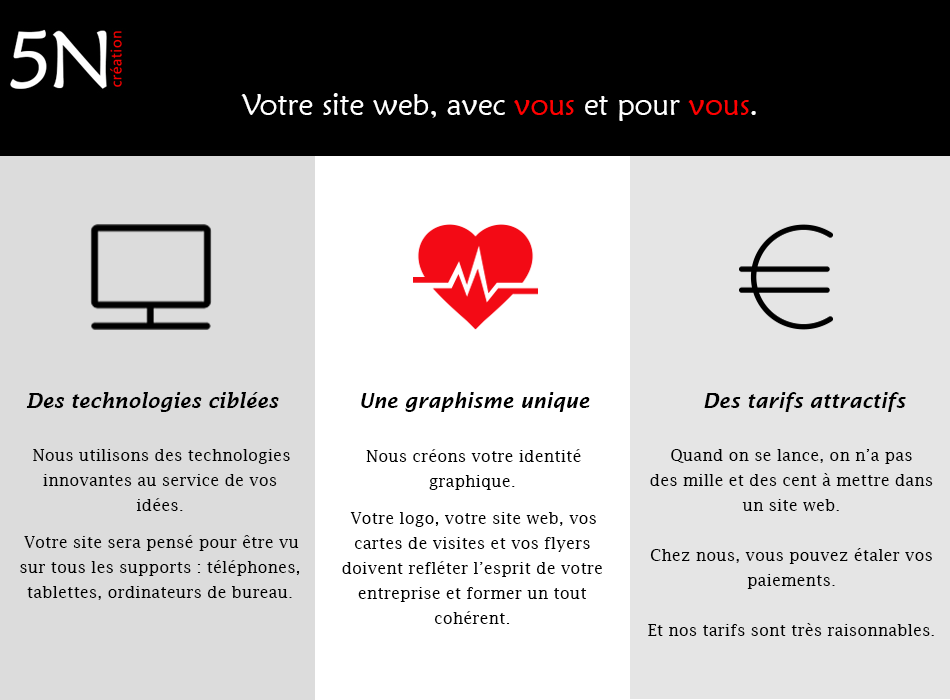
<style>
.page{position:relative;width:950px;height:700px;background:#e5e5e5}
.page>*{position:absolute;margin:0}
.t1{font:30px "MaiandraGD-Regular";color:#ffffff}
.t2{font:30px "MaiandraGD-Regular";color:#ff0000}
.t3{font:20px "LucidaFax-DemiItalic";color:#000000}
.t4{font:20px "LucidaSans-DemiItalic";color:#000000}
.t5{font:16px/25px "LucidaFax";color:#000000}
</style>
<div class="page">
<p class="t1" style="left:241px;top:93px;width:515px;height:28px">Votre site web, avec <span class="t2">vous </span>et pour <span class="t2">vous</span>.</p>
<p class="t3" style="left:26px;top:392px;width:253px;height:20px">Des technologies ciblées</p>
<p class="t4" style="left:361px;top:392px;width:229px;height:20px">Une graphisme unique</p>
<p class="t4" style="left:704px;top:392px;width:202px;height:20px">Des tarifs attractifs</p>
<p class="t5" style="left:20px;top:449px;width:280px;height:151px;text-align:center">Nous utilisons des technologies innovantes au service de vos idées. <br>Votre site sera pensé pour être vu sur tous les supports : téléphones, tablettes, ordinateurs de bureau.</p>
<p class="t5" style="left:342px;top:449px;width:260px;height:175px;text-align:center">Nous créons votre identité  graphique.<br>Votre logo, votre site web, vos cartes de visites et vos flyers doivent refléter l’esprit de votre entreprise et former un tout cohérent.</p>
<p class="t5" style="left:648px;top:449px;width:286px;height:187px;text-align:center">Quand on se lance, on n’a pas <br>des mille et des cent à mettre dans un site web. <br><br>Chez nous, vous pouvez étaler vos paiements. <br><br>Et nos tarifs sont très raisonnables.</p>
</div>
